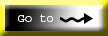
<style>
.page{position:relative;width:108px;height:36px}
.page>*{position:absolute;margin:0}
.t1{font:12px "Courier";color:#fffefe}
</style>
<div class="page">
<p class="t1" style="left:18px;top:14px;width:35px;height:8px">Go to</p>
</div>
